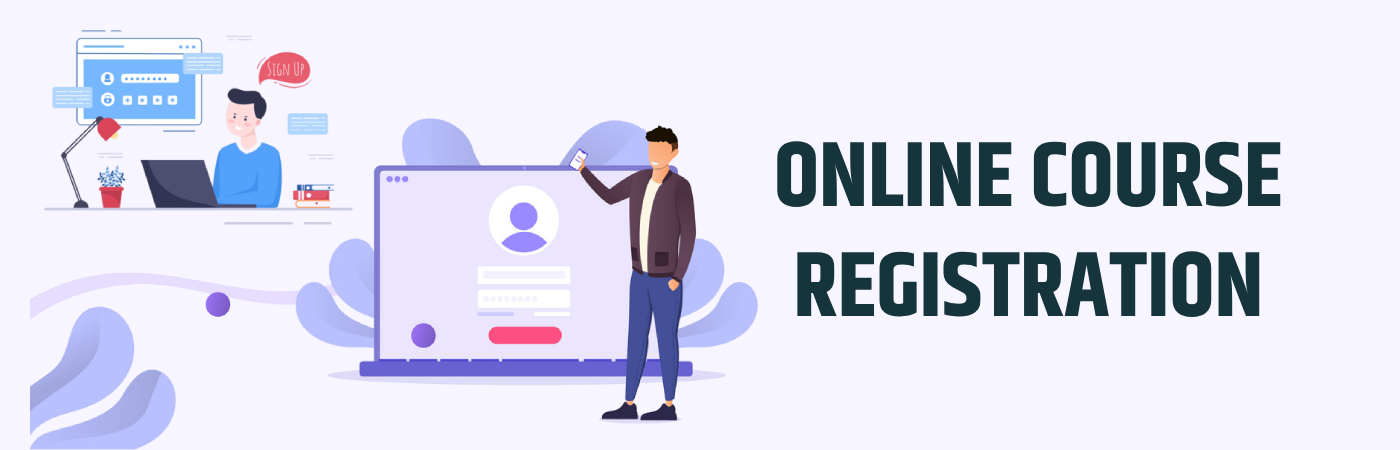
<style>
.page{position:relative;width:1400px;height:450px;background:#f7f5ff}
.page>*{position:absolute;margin:0}
.t1{font:92px "Khand-Bold";color:#16343c;text-transform:uppercase}
</style>
<div class="page">
<p class="t1" style="left:777px;top:141px;width:504px;height:176px;text-align:center">Online Course<br>Registration</p>
</div>
